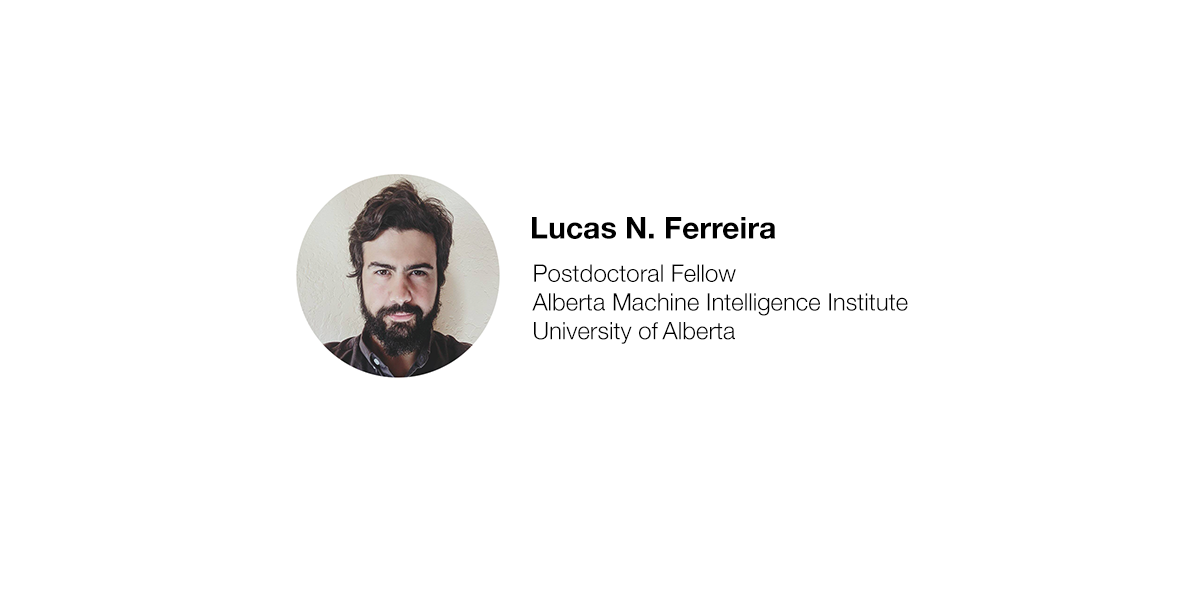
<style>
.page{position:relative;width:1200px;height:600px;background:#ffffff}
.page>*{position:absolute;margin:0}
.t1{font:30.1px "HelveticaNeue-Bold";color:#000000}
.t2{font:24px "HelveticaNeue-Light";color:#000000}
</style>
<div class="page">
<p class="t1" style="left:532px;top:217px;width:244px;height:22px">Lucas N. Ferreira</p>
<p class="t2" style="left:532px;top:264px;width:376px;height:80px">Postdoctoral Fellow<br>Alberta Machine Intelligence Institute<br>University of Alberta</p>
</div>
